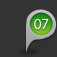
<style>
.page{position:relative;width:57px;height:57px;background:#333333}
.page>*{position:absolute;margin:0}
.t1{font:15px "MyriadPro-Regular";color:#ffffff}
</style>
<div class="page">
<p class="t1" style="left:34px;top:19px;width:15px;height:10px">07</p>
</div>
